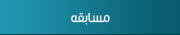
<style>
.page{position:relative;width:180px;height:35px}
.page>*{position:absolute;margin:0}
.t1{font:14px "Mj_Flow";letter-spacing:-0.001em;color:#f1f2f2}
</style>
<div class="page">
<p class="t1" style="left:71px;top:12px;width:39px;height:13px">مسابقه</p>
</div>
